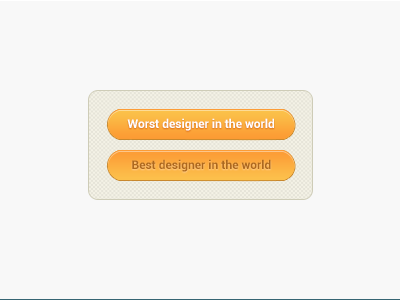
<style>
.page{position:relative;width:400px;height:300px;background:#f8f8f8}
.page>*{position:absolute;margin:0}
.t1{font:12px "Roboto-Bold";color:#ffffff}
.t2{font:12px "Roboto-Bold";color:#ae681d}
</style>
<div class="page">
<p class="t1" style="left:127px;top:118px;width:147px;height:13px">Worst designer in the world</p>
<p class="t2" style="left:132px;top:159px;width:139px;height:13px">Best designer in the world</p>
</div>
